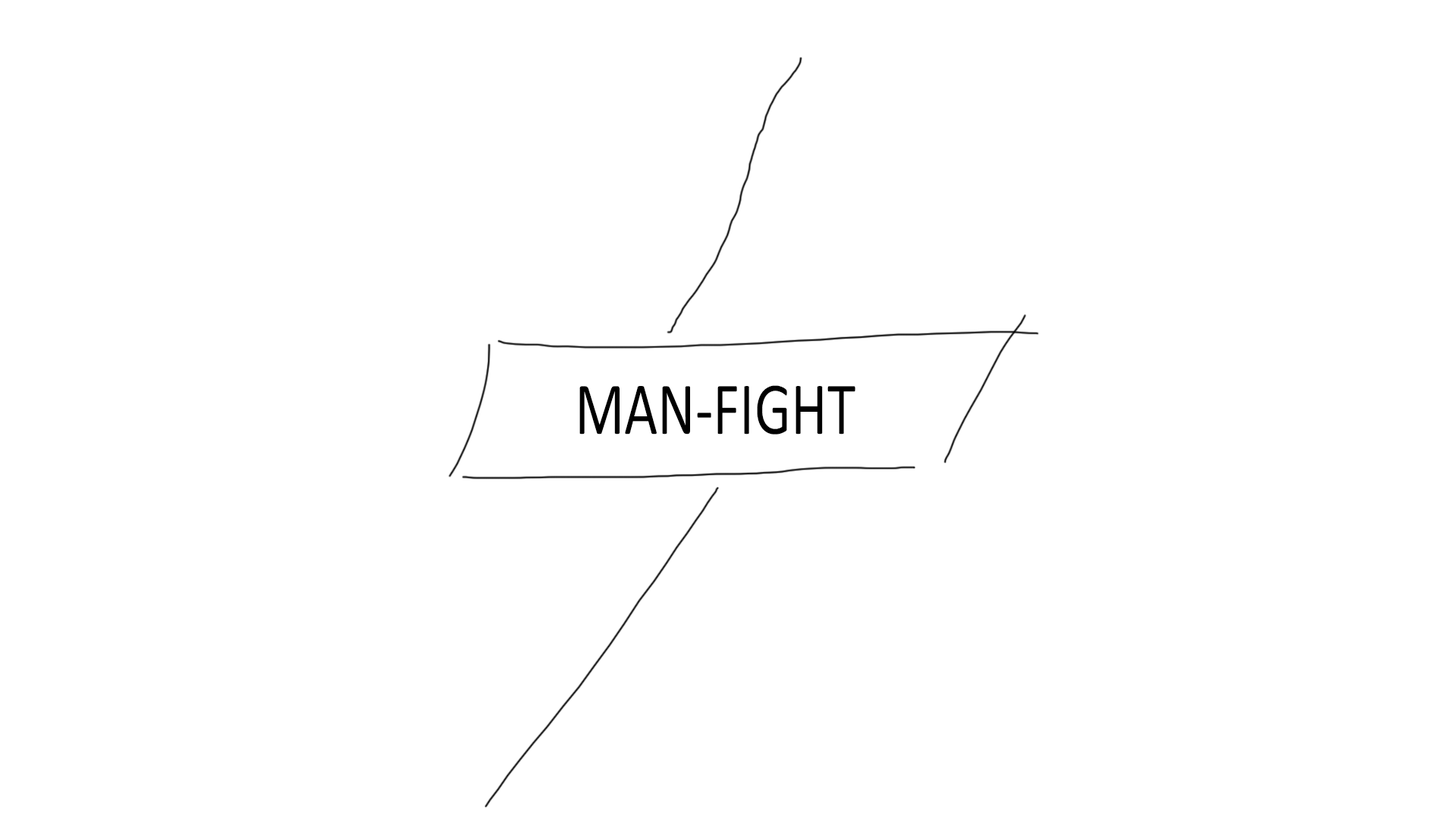
<style>
.page{position:relative;width:1456px;height:819px;background:#ffffff}
.page>*{position:absolute;margin:0}
.t1{font:75.2px "Calibri";color:#000000;scale:0.77 1}
</style>
<div class="page">
<p class="t1" style="left:579px;top:385px;width:276px;height:50px">MAN-FIGHT</p>
</div>
